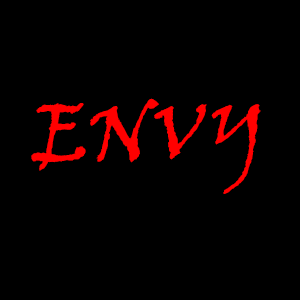
<style>
.page{position:relative;width:300px;height:300px;background:#000000}
.page>*{position:absolute;margin:0}
.t1{font:80px "VinerHandITC";color:#ff0000}
</style>
<div class="page">
<p class="t1" style="left:31px;top:98px;width:230px;height:96px">ENVY</p>
</div>
